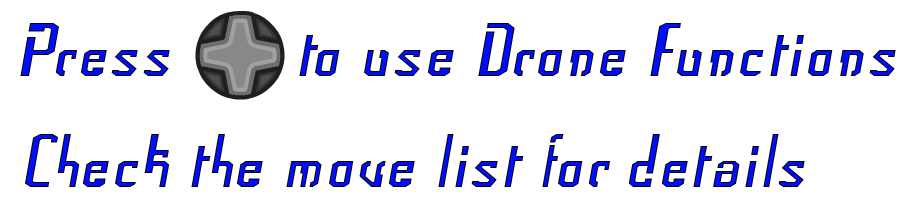
<style>
.page{position:relative;width:900px;height:200px;background:#ffffff}
.page>*{position:absolute;margin:0}
.t1{font:72px "Frak-Regular";color:#000dff}
.t2{font:72px "Frak-Regular"}
</style>
<div class="page">
<p class="t1" style="left:20px;top:23px;width:150px;height:53px">Press</p>
<p class="t1" style="left:299px;top:23px;width:597px;height:53px">to use Drone Functions</p>
<p class="t2" style="left:25px;top:134px;width:780px;height:53px">Check the move list for details</p>
</div>
